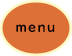
<style>
.page{position:relative;width:72px;height:56px;background:#dd7037}
.page>*{position:absolute;margin:0}
.t1{font:13.5px "UDDigiKyokashoNK-B";letter-spacing:0.08em;color:#000000}
</style>
<div class="page">
<p class="t1" style="left:16px;top:24px;width:39px;height:8px">menu</p>
</div>
